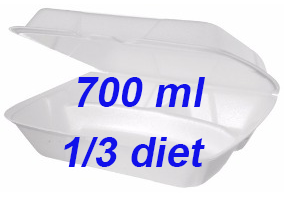
<style>
.page{position:relative;width:284px;height:204px;background:#fefefe}
.page>*{position:absolute;margin:0}
.t1{font:72px "Arial-BoldMT";color:#1111ea;font-style:italic}
</style>
<div class="page">
<p class="t1" style="left:77px;top:77px;width:128px;height:30px">700 ml</p>
<p class="t1" style="left:64px;top:137px;width:141px;height:30px">1/3 diet</p>
</div>
